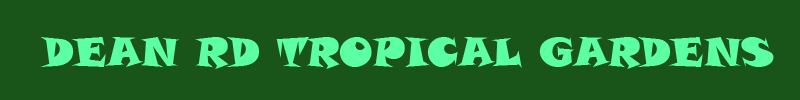
<style>
.page{position:relative;width:800px;height:100px;background:#195419}
.page>*{position:absolute;margin:0}
.t1{font:40px "SnapITC-Regular";color:#5cffa3}
</style>
<div class="page">
<p class="t1" style="left:40px;top:37px;width:734px;height:32px">DEAN RD TROPICAL GARDENS</p>
</div>
